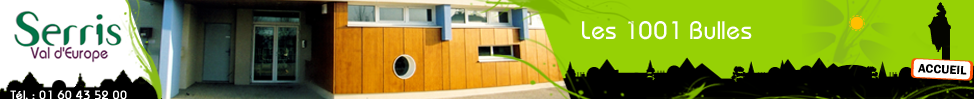
<style>
.page{position:relative;width:974px;height:99px;background:#96d105}
.page>*{position:absolute;margin:0}
.t1{font:25px "DynameSSK";color:#ffffff}
.t2{font:11.8px "DynameSSK";color:#ffffff;font-weight:bold}
</style>
<div class="page">
<p class="t1" style="left:582px;top:21px;width:170px;height:19px">Les 1001 Bulles</p>
<p class="t2" style="left:10px;top:90px;width:117px;height:9px">Tél. : 01 60 43 52 00</p>
</div>
